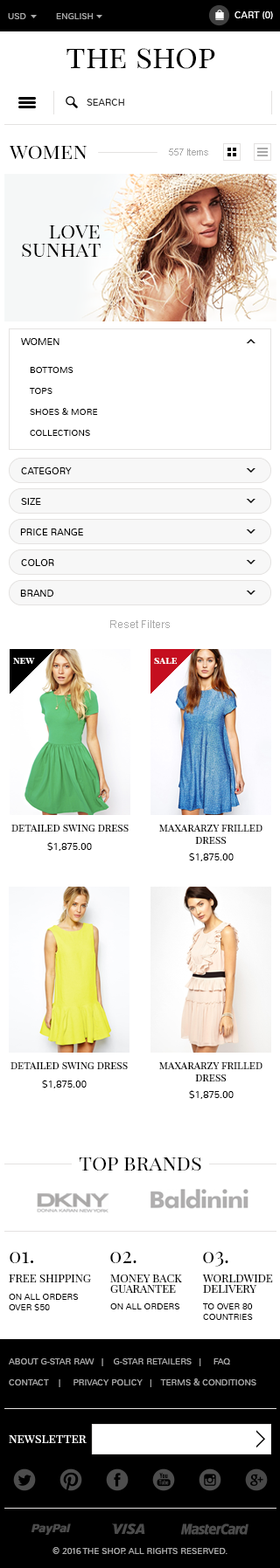
<style>
.page{position:relative;width:280px;height:1568px;background:#ffffff}
.page>*{position:absolute;margin:0}
.t1{font:8.7px "Nunito-Light";color:#aaaaaa;text-transform:uppercase}
.t2{font:9.6px "Nunito-Light";color:#ffffff;text-transform:uppercase}
.t3{font:31.4px "PlayfairDisplaySC-Regular";color:#000000}
.t4{font:9.6px "Nunito-Light";color:#282828;text-transform:uppercase}
.t5{font:21px "PlayfairDisplaySC-Regular";color:#000000}
.t6{font:9.6px "ArialMT";color:#aaaaaa}
.t7{font:21px/18.3px "PlayfairDisplaySC-Regular";color:#000000}
.t8{font:9.6px "Nunito-Light";color:#000000;text-transform:uppercase}
.t9{font:8.7px/21px "Nunito-Light";color:#000000;text-transform:uppercase}
.t10{font:10.5px "ArialMT";color:#aaaaaa}
.t11{font:9.6px "PlayfairDisplaySC-Bold";color:#ffffff}
.t12{font:10.5px "PlayfairDisplaySC-Regular";color:#000000}
.t13{font:9.6px "Nunito-Light";color:#000000}
.t14{font:11.4px "PlayfairDisplaySC-Regular";color:#000000;text-transform:uppercase}
.t15{font:11.4px/10.5px "PlayfairDisplaySC-Regular";color:#000000;text-transform:uppercase}
.t16{font:8.7px "Nunito-Light";color:#000000;text-transform:uppercase}
.t17{font:8.7px/21px "Nunito-Light";color:#aaaaaa;text-transform:uppercase}
.t18{font:12.2px "PlayfairDisplaySC-Regular";color:#ffffff}
</style>
<div class="page">
<p class="t1" style="left:8px;top:13px;width:18px;height:6px">usD</p>
<p class="t1" style="left:56px;top:13px;width:37px;height:6px">English</p>
<p class="t2" style="left:234px;top:11px;width:39px;height:8px">Cart (0)</p>
<p class="t3" style="left:66px;top:48px;width:149px;height:21px">the shop</p>
<p class="t4" style="left:86px;top:99px;width:38px;height:7px">search</p>
<p class="t5" style="left:9px;top:146px;width:78px;height:13px">women</p>
<p class="t6" style="left:169px;top:149px;width:39px;height:6px">557 Items</p>
<p class="t7" style="left:22px;top:225px;width:78px;height:32px;text-align:right">love<br>sunhat</p>
<p class="t8" style="left:21px;top:338px;width:38px;height:7px">women</p>
<p class="t9" style="left:30px;top:367px;width:68px;height:69px">Bottoms<br>Tops<br>Shoes &amp; more<br>Collections</p>
<p class="t8" style="left:21px;top:467px;width:51px;height:7px">category</p>
<p class="t8" style="left:21px;top:498px;width:20px;height:7px">size</p>
<p class="t8" style="left:20px;top:528px;width:63px;height:7px">price range</p>
<p class="t8" style="left:21px;top:559px;width:33px;height:7px">color</p>
<p class="t8" style="left:20px;top:590px;width:33px;height:7px">brand</p>
<p class="t10" style="left:110px;top:620px;width:59px;height:8px">Reset Filters</p>
<p class="t11" style="left:13px;top:658px;width:22px;height:6px">new</p>
<p class="t11" style="left:154px;top:658px;width:22px;height:6px">sale</p>
<p class="t12" style="left:11px;top:825px;width:117px;height:7px">detailed swing dress</p>
<p class="t12" style="left:159px;top:825px;width:103px;height:19px;text-align:center">maxararzy frilled<br>dress</p>
<p class="t13" style="left:47px;top:842px;width:45px;height:9px">$1,875.00</p>
<p class="t13" style="left:189px;top:853px;width:44px;height:8px">$1,875.00</p>
<p class="t12" style="left:10px;top:1062px;width:118px;height:7px">detailed swing dress</p>
<p class="t12" style="left:159px;top:1062px;width:103px;height:19px;text-align:center">maxararzy frilled<br>dress</p>
<p class="t13" style="left:42px;top:1080px;width:44px;height:8px">$1,875.00</p>
<p class="t13" style="left:189px;top:1090px;width:44px;height:9px">$1,875.00</p>
<p class="t5" style="left:79px;top:1157px;width:122px;height:14px">top brands</p>
<p class="t5" style="left:10px;top:1252px;width:23px;height:11px">01.</p>
<p class="t5" style="left:110px;top:1252px;width:26px;height:11px">02.</p>
<p class="t5" style="left:203px;top:1252px;width:25px;height:15px">03.</p>
<p class="t14" style="left:9px;top:1274px;width:82px;height:8px">Free Shipping</p>
<p class="t15" style="left:110px;top:1274px;width:72px;height:19px">Money back<br>guarantee</p>
<p class="t15" style="left:202px;top:1274px;width:71px;height:19px">Worldwide<br>Delivery</p>
<p class="t16" style="left:9px;top:1294px;width:70px;height:17px">On all orders<br>over $50</p>
<p class="t16" style="left:110px;top:1303px;width:70px;height:6px">On all orders</p>
<p class="t16" style="left:203px;top:1303px;width:49px;height:17px">To over 80<br>countries</p>
<p class="t17" style="left:9px;top:1358px;width:247px;height:29px">About G-Star Raw   |    G-Star Retailers   |     FAQ<br>Contact    |     Privacy Policy   |    Terms &amp; Conditions</p>
<p class="t18" style="left:9px;top:1435px;width:77px;height:8px">newsletter</p>
<p class="t1" style="left:52px;top:1547px;width:175px;height:7px">© 2016 the shop. All Rights Reserved.</p>
</div>
